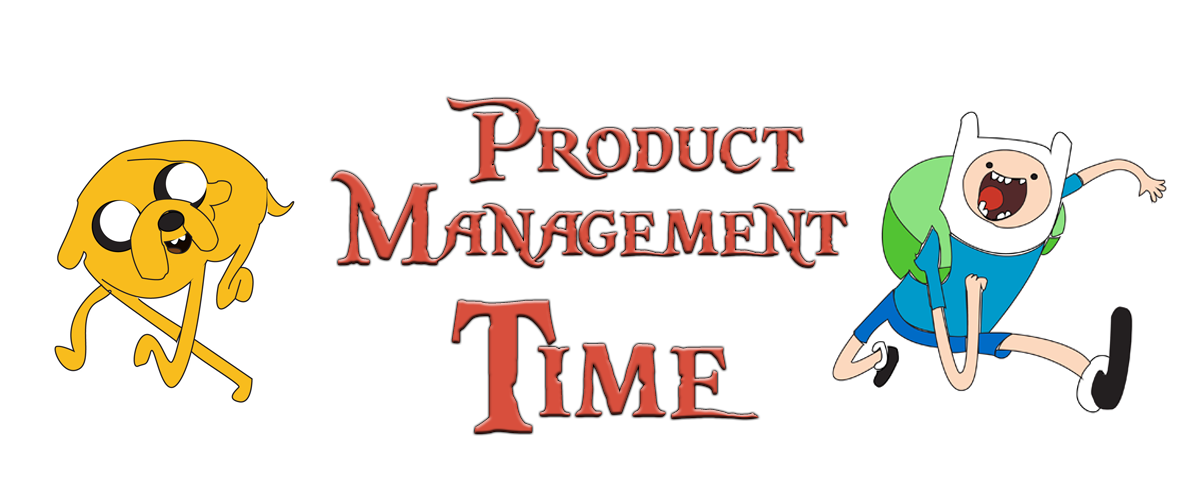
<style>
.page{position:relative;width:1200px;height:500px;background:#ffffff}
.page>*{position:absolute;margin:0}
.t1{font:121.4px/84px "PiecesofEight";color:#d84f3d}
.t2{font:121.4px/170px "PiecesofEight";color:#d84f3d}
.t3{font:121.4px/118px "PiecesofEight";color:#d84f3d}
.t4{font:200px/170px "PiecesofEight";color:#d84f3d}
</style>
<div class="page">
<p class="t1" style="left:331px;top:97px;width:517px;height:337px;text-align:center"><span class="t2">  </span><span class="t3">Product<br></span>Management<br><span class="t4">Time</span></p>
</div>
